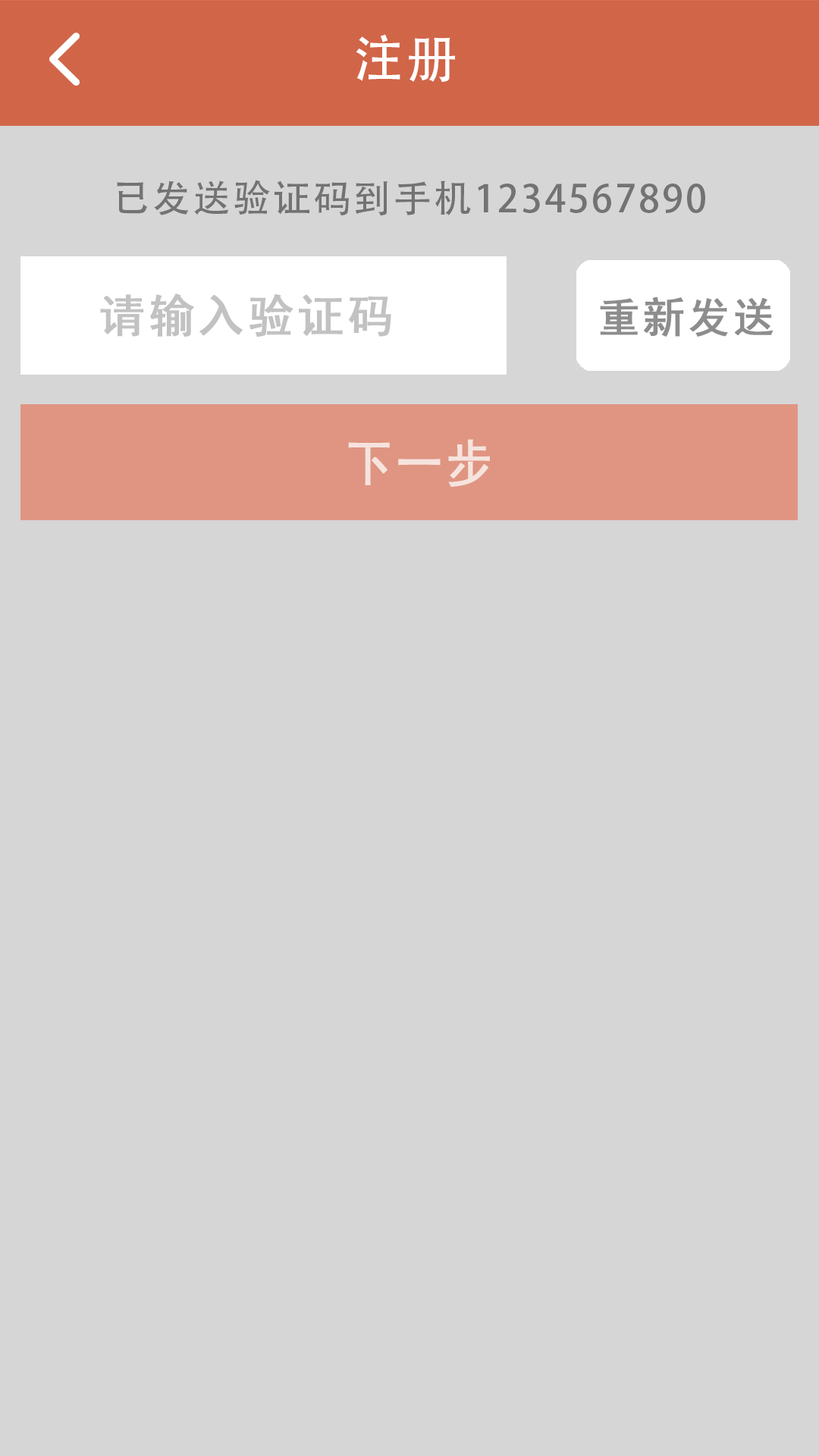
<style>
.page{position:relative;width:819px;height:1456px;background:#d6d6d6}
.page>*{position:absolute;margin:0}
.t1{font:50.8px "AdobeHeitiStd-Regular";letter-spacing:0.06em;color:#ffffff}
.t2{font:37.9px "AdobeHeitiStd-Regular";letter-spacing:0.06em;color:#737373}
.t3{font:45.5px "SimHei";letter-spacing:0.06em;color:#c2c2c2;font-weight:bold}
.t4{font:41.7px "SimHei";letter-spacing:0.06em;color:#8d8d8d;font-weight:bold}
.t5{font:51.8px "SimHei";letter-spacing:0.06em;color:#f6e3de;font-weight:bold;scale:0.88 1}
</style>
<div class="page">
<p class="t1" style="left:356px;top:34px;width:99px;height:48px">注册</p>
<p class="t2" style="left:117px;top:180px;width:588px;height:36px">已发送验证码到手机1234567890</p>
<p class="t3" style="left:100px;top:293px;width:291px;height:44px">请输入验证码</p>
<p class="t4" style="left:600px;top:297px;width:173px;height:40px">重新发送</p>
<p class="t5" style="left:348px;top:439px;width:142px;height:48px">下一步</p>
</div>
